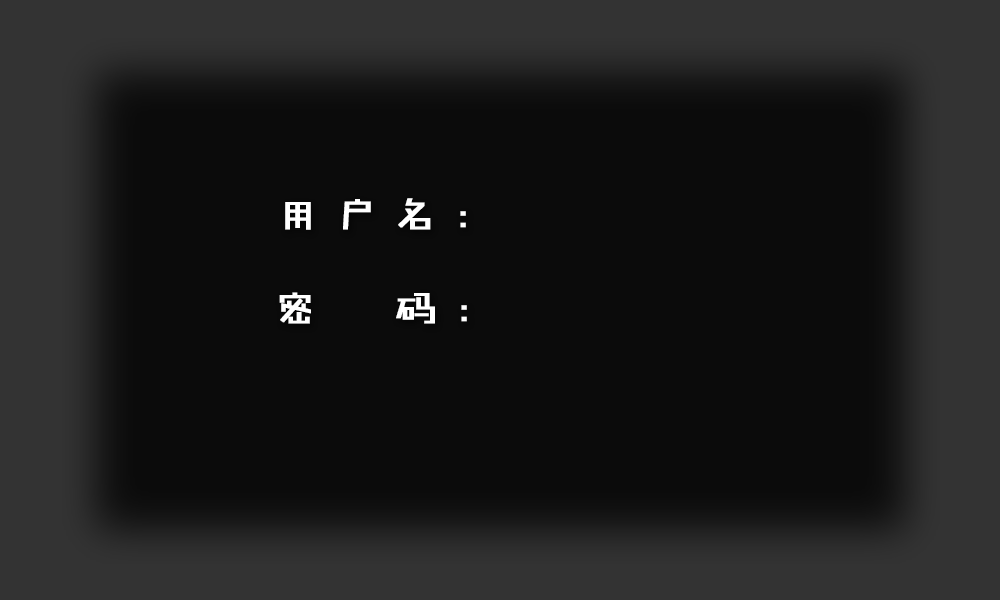
<style>
.page{position:relative;width:1000px;height:600px;background:#0b0b0b}
.page>*{position:absolute;margin:0}
.t1{font:41.7px "FZJHJW--GB1-0";letter-spacing:0.38em;color:#ffffff;font-weight:bold}
</style>
<div class="page">
<p class="t1" style="left:285px;top:198px;width:181px;height:32px">用户名：</p>
<p class="t1" style="left:279px;top:292px;width:188px;height:32px">密  码：</p>
</div>
